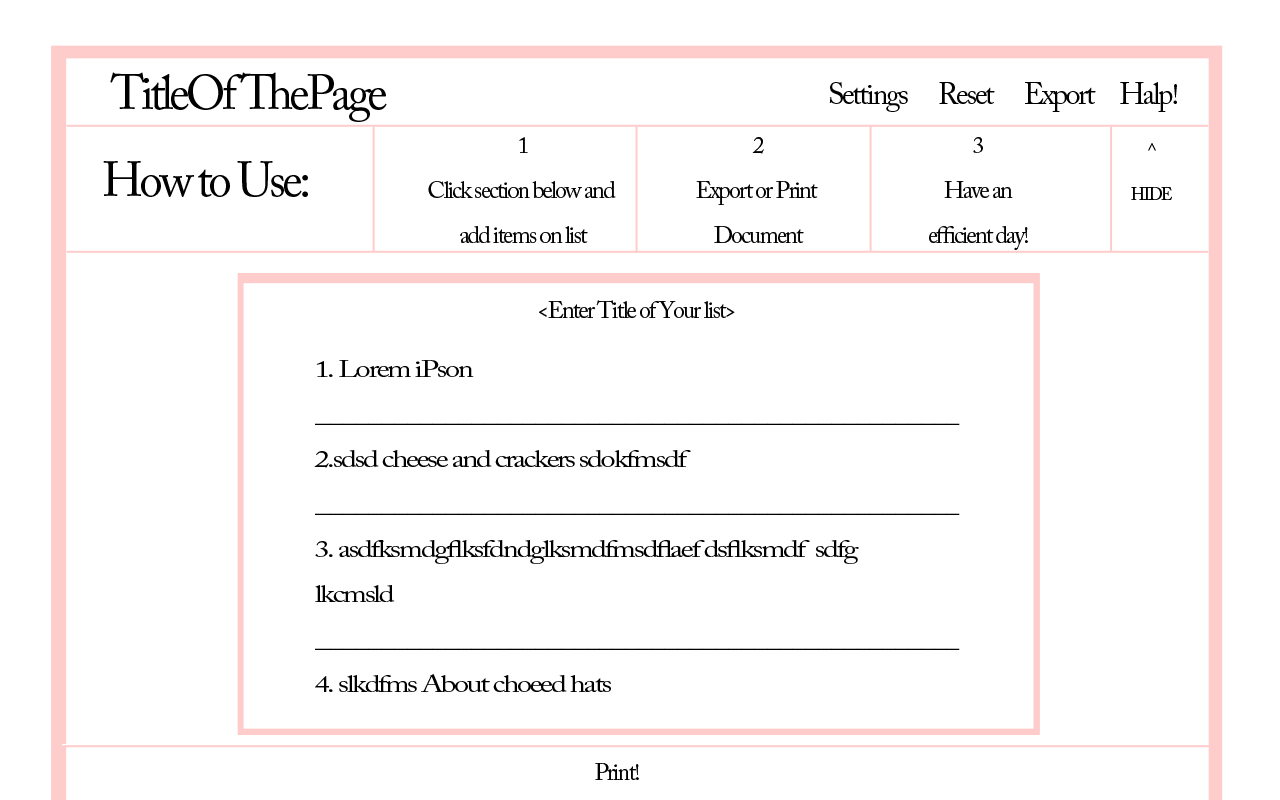
<style>
.page{position:relative;width:1280px;height:800px;background:#ffffff}
.page>*{position:absolute;margin:0}
.t1{font:48px "ACaslonPro-Regular";letter-spacing:-0.08em;color:#000000}
.t2{font:30px "ACaslonPro-Regular";letter-spacing:-0.08em;color:#000000}
.t3{font:24px/45px "ACaslonPro-Regular";letter-spacing:-0.08em;color:#000000}
.t4{font:17px/45px "ACaslonPro-Regular";letter-spacing:-0.08em;color:#000000}
.t5{font:24px "ACaslonPro-Regular";letter-spacing:-0.08em;color:#000000}
.t6{font:24px/45px "ACaslonPro-Regular";letter-spacing:-0.08em;color:#000000;scale:1.28 1}
</style>
<div class="page">
<p class="t1" style="left:110px;top:72px;width:277px;height:50px">TitleOf ThePage</p>
<p class="t2" style="left:829px;top:82px;width:348px;height:30px">Settings      Reset      Export     Halp!</p>
<p class="t3" style="left:428px;top:137px;width:188px;height:106px;text-align:center">1<br>Click section below and <br>add items on list</p>
<p class="t3" style="left:696px;top:137px;width:122px;height:106px;text-align:center">2<br>Export or Print <br>Document</p>
<p class="t3" style="left:929px;top:137px;width:99px;height:113px;text-align:center">3<br>Have an<br>efficient day!</p>
<p class="t4" style="left:1131px;top:143px;width:41px;height:57px;text-align:center">^<br>HIDE</p>
<p class="t1" style="left:103px;top:161px;width:205px;height:36px">How to Use:</p>
<p class="t5" style="left:539px;top:300px;width:196px;height:18px">&lt;Enter Title of Your list&gt;</p>
<p class="t6" style="left:314px;top:360px;width:646px;height:332px">1. Lorem iPson<br>__________________________________________________<br>2.sdsd cheese and crackers sdokfmsdf<br>__________________________________________________<br>3. asdfksmdgflksfdndglksmdfmsdflaef dsflksmdf  sdfg<br>lkcmsld<br>__________________________________________________<br>4. slkdfms About choeed hats</p>
<p class="t5" style="left:595px;top:763px;width:44px;height:17px">Print!</p>
</div>
